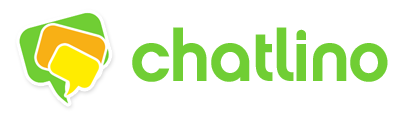
<style>
.page{position:relative;width:408px;height:119px;background:#ffffff}
.page>*{position:absolute;margin:0}
.t1{font:72px "Chalet-NewYorkNineteenSeventy";letter-spacing:-0.025em;color:#70ce34}
</style>
<div class="page">
<p class="t1" style="left:132px;top:27px;width:256px;height:55px">chatlino</p>
</div>
